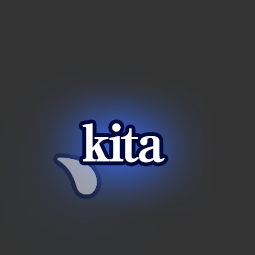
<style>
.page{position:relative;width:255px;height:255px;background:#333333}
.page>*{position:absolute;margin:0}
.t1{font:50px "RyuminPro-ExBold";letter-spacing:-0.08em;color:#ffffff;font-weight:bold}
</style>
<div class="page">
<p class="t1" style="left:82px;top:123px;width:83px;height:40px">kita</p>
</div>
